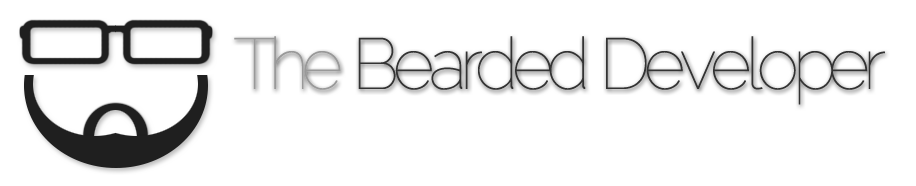
<style>
.page{position:relative;width:916px;height:186px;background:#ffffff}
.page>*{position:absolute;margin:0}
.t1{font:72px "Raleway-Thin";letter-spacing:-0.09em;color:#333333}
.t2{font:72px "Raleway-Thin";letter-spacing:-0.09em;color:#999999}
</style>
<div class="page">
<p class="t1" style="left:234px;top:36px;width:651px;height:69px"><span class="t2">The </span>Bearded Developer</p>
</div>
